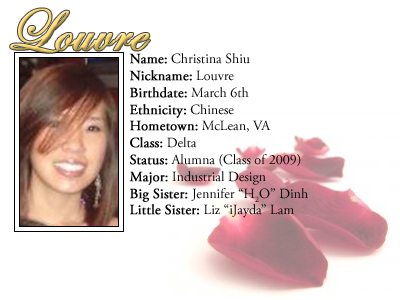
<style>
.page{position:relative;width:400px;height:300px;background:#ffffff}
.page>*{position:absolute;margin:0}
.t1{font:60px "EdwardianScriptITC";font-weight:bold}
.t2{font:14px "AGaramondPro-Regular";color:#000000}
.t3{font:14px "AGaramondPro-Regular";color:#000000;font-weight:bold}
</style>
<div class="page">
<p class="t1" style="left:10px;top:8px;width:140px;height:45px">Louvre</p>
<p class="t2" style="left:129px;top:53px;width:179px;height:165px"><span class="t3">Name:</span> Christina Shiu<br><span class="t3">Nickname:</span> Louvre<br><span class="t3">Birthdate:</span> March 6th<br><span class="t3">Ethnicity:</span> Chinese<br><span class="t3">Hometown:</span> McLean, VA<br><span class="t3">Class:</span> Delta<br><span class="t3">Status:</span> Alumna (Class of 2009)<br><span class="t3">Major:</span> Industrial Design<br><span class="t3">Big Sister: </span>Jennifer “H2O” Dinh<br><span class="t3">Little Sister:</span> Liz “iJayda” Lam</p>
</div>
